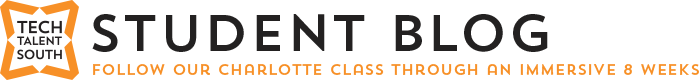
<style>
.page{position:relative;width:700px;height:80px;background:#ffffff}
.page>*{position:absolute;margin:0}
.t1{font:51.7px "TrendSansOne";color:#232121}
.t2{font:15.4px "TrendSansOne";color:#f79027}
</style>
<div class="page">
<p class="t1" style="left:92px;top:14px;width:456px;height:38px">Student Blog</p>
<p class="t2" style="left:93px;top:64px;width:606px;height:11px">Follow our Charlotte class through an immersive 8 weeks</p>
</div>
